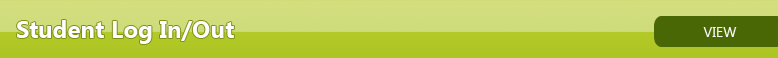
<style>
.page{position:relative;width:778px;height:58px}
.page>*{position:absolute;margin:0}
.t1{font:24px "SegoeUI-Bold";color:#fefefe}
.t2{font:14px "SegoeUI";color:#f6f7f1}
</style>
<div class="page">
<p class="t1" style="left:17px;top:20px;width:217px;height:24px">Student Log In/Out</p>
<p class="t2" style="left:703px;top:27px;width:34px;height:10px">VIEW</p>
</div>
